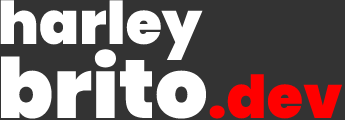
<style>
.page{position:relative;width:345px;height:120px;background:#333333}
.page>*{position:absolute;margin:0}
.t1{font:59px "Poppins-Black";color:#ffffff}
.t2{font:83px "Poppins-Black";color:#ffffff}
.t3{font:59px "Poppins-Black";color:#ff0000}
</style>
<div class="page">
<p class="t1" style="left:0px;top:0px;width:203px;height:60px">harley</p>
<p class="t2" style="left:0px;top:49px;width:343px;height:70px">brito<span class="t3">.dev</span></p>
</div>
